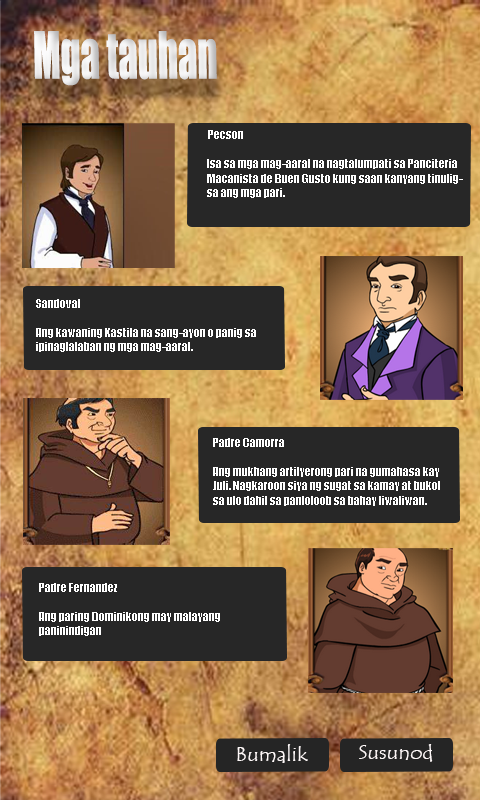
<style>
.page{position:relative;width:480px;height:800px;background:#272727}
.page>*{position:absolute;margin:0}
.t1{font:60px "Impact";color:#ffffff;scale:0.64 1}
.t2{font:12px "Impact";color:#ffffff}
.t3{font:20px "TempusSansITC";color:#fef8f8;scale:1.06 1}
</style>
<div class="page">
<p class="t1" style="left:34px;top:31px;width:183px;height:55px">Mga tauhan</p>
<p class="t2" style="left:207px;top:130px;width:256px;height:68px">Pecson<br><br>Isa sa mga mag-aaral na nagtalumpati sa Panciteria Macanista de Buen Gusto kung saan kanyang tinuligsa ang mga pari.</p>
<p class="t2" style="left:36px;top:299px;width:220px;height:53px">Sandoval<br><br>Ang kawaning Kastila na sang-ayon o panig sa <br>ipinaglalaban ng mga mag-aaral.</p>
<p class="t2" style="left:213px;top:438px;width:227px;height:68px">Padre Camorra<br><br>Ang mukhang artilyerong pari na gumahasa kay <br>Juli. Nagkaroon siya ng sugat sa kamay at bukol <br>sa ulo dahil sa panloloob sa bahay liwaliwan.</p>
<p class="t2" style="left:39px;top:583px;width:181px;height:53px">Padre Fernandez<br><br>Ang paring Dominikong may malayang <br>paninindigan</p>
<p class="t3" style="left:237px;top:744px;width:71px;height:19px">Bumalik</p>
<p class="t3" style="left:359px;top:744px;width:74px;height:18px">Susunod</p>
</div>
